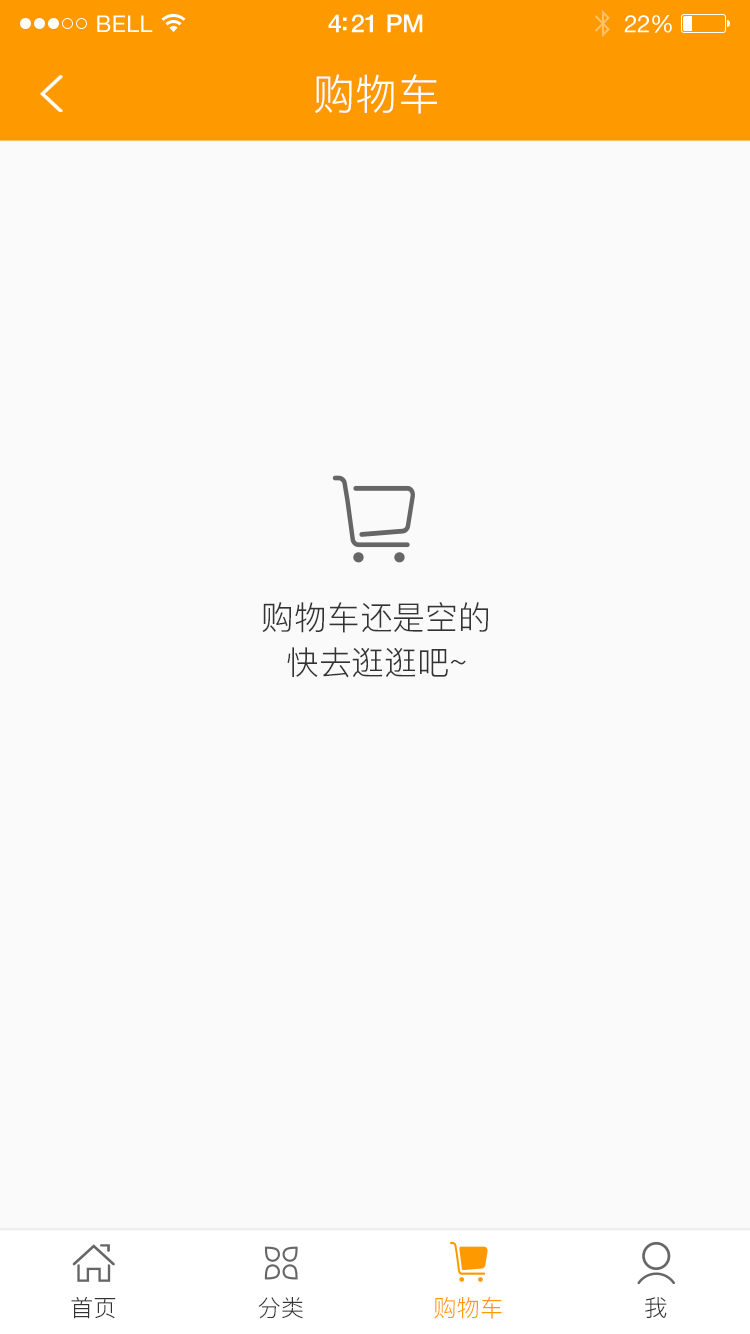
<style>
.page{position:relative;width:750px;height:1334px;background:#fafafa}
.page>*{position:absolute;margin:0}
.t1{font:23px "HelveticaNeue";letter-spacing:0.02em;color:#ffffff}
.t2{font:25px "HelveticaNeue-Medium";letter-spacing:-0.02em;color:#ffffff}
.t3{font:24px "HelveticaNeue";letter-spacing:-0.02em;color:#ffffff}
.t4{font:42.2px "PingFang-SC-Regular";color:#ffffff}
.t5{font:32.8px "PingFang-SC-Regular";color:#333333}
.t6{font:23.4px "PingFang-SC-Regular";color:#333333}
.t7{font:23.4px "PingFang-SC-Regular";color:#ff9900}
</style>
<div class="page">
<p class="t1" style="left:97px;top:15px;width:56px;height:17px">BELL</p>
<p class="t2" style="left:328px;top:14px;width:95px;height:19px">4:21 PM</p>
<p class="t3" style="left:624px;top:15px;width:48px;height:18px">22%</p>
<p class="t4" style="left:315px;top:74px;width:122px;height:40px">购物车</p>
<p class="t5" style="left:262px;top:602px;width:226px;height:76px;text-align:center">购物车还是空的<br>快去逛逛吧~</p>
<p class="t6" style="left:71px;top:1296px;width:45px;height:23px">首页</p>
<p class="t6" style="left:258px;top:1297px;width:45px;height:22px">分类</p>
<p class="t7" style="left:434px;top:1296px;width:68px;height:23px">购物车</p>
<p class="t6" style="left:645px;top:1297px;width:22px;height:21px">我</p>
</div>
